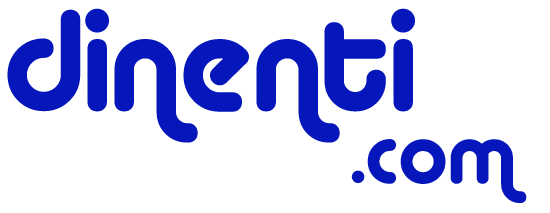
<style>
.page{position:relative;width:550px;height:213px;background:#ffffff}
.page>*{position:absolute;margin:0}
.t1{font:141.7px "Alba";color:#0516ba}
.t2{font:87.5px "Alba";color:#0516ba}
.t3{font:75px "Alba";color:#0516ba}
</style>
<div class="page">
<p class="t1" style="left:7px;top:8px;width:408px;height:135px">dinenti</p>
<p class="t2" style="left:351px;top:139px;width:176px;height:64px"><span class="t3">.</span>com</p>
</div>
